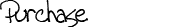
<style>
.page{position:relative;width:171px;height:27px;background:#ffffff}
.page>*{position:absolute;margin:0}
.t1{font:36px "TallPaul";color:#000000}
</style>
<div class="page">
<p class="t1" style="left:0px;top:0px;width:88px;height:28px">Purchase</p>
</div>
